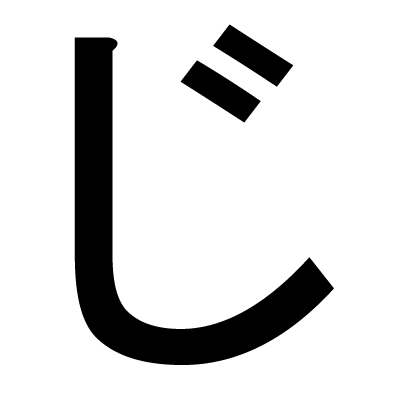
<style>
.page{position:relative;width:400px;height:400px;background:#ffffff}
.page>*{position:absolute;margin:0}
.t1{font:416.7px "MS-PGothic";color:#000000}
</style>
<div class="page">
<p class="t1" style="left:74px;top:24px;width:260px;height:341px">じ</p>
</div>
